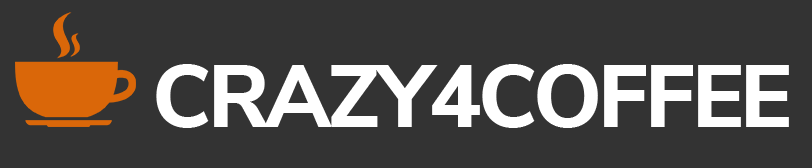
<style>
.page{position:relative;width:812px;height:168px;background:#333333}
.page>*{position:absolute;margin:0}
.t1{font:87.8px "NunitoSans-ExtraBold";letter-spacing:-0.04em;color:#ffffff;text-transform:uppercase}
</style>
<div class="page">
<p class="t1" style="left:156px;top:64px;width:633px;height:64px">crazy4coffee</p>
</div>
